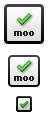
<style>
.page{position:relative;width:48px;height:120px;background:#ffffff}
.page>*{position:absolute;margin:0}
.t1{font:8px "PFRondaSeven-Bold";color:#1a1a1a}
</style>
<div class="page">
<p class="t1" style="left:14px;top:31px;width:20px;height:5px">moo</p>
<p class="t1" style="left:14px;top:76px;width:20px;height:5px">moo</p>
</div>
